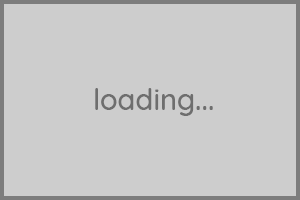
<style>
.page{position:relative;width:300px;height:200px;background:#cdcdcd}
.page>*{position:absolute;margin:0}
.t1{font:29px "Quicksand-Medium";color:#6e6e6e}
</style>
<div class="page">
<p class="t1" style="left:95px;top:88px;width:118px;height:28px">loading...</p>
</div>
